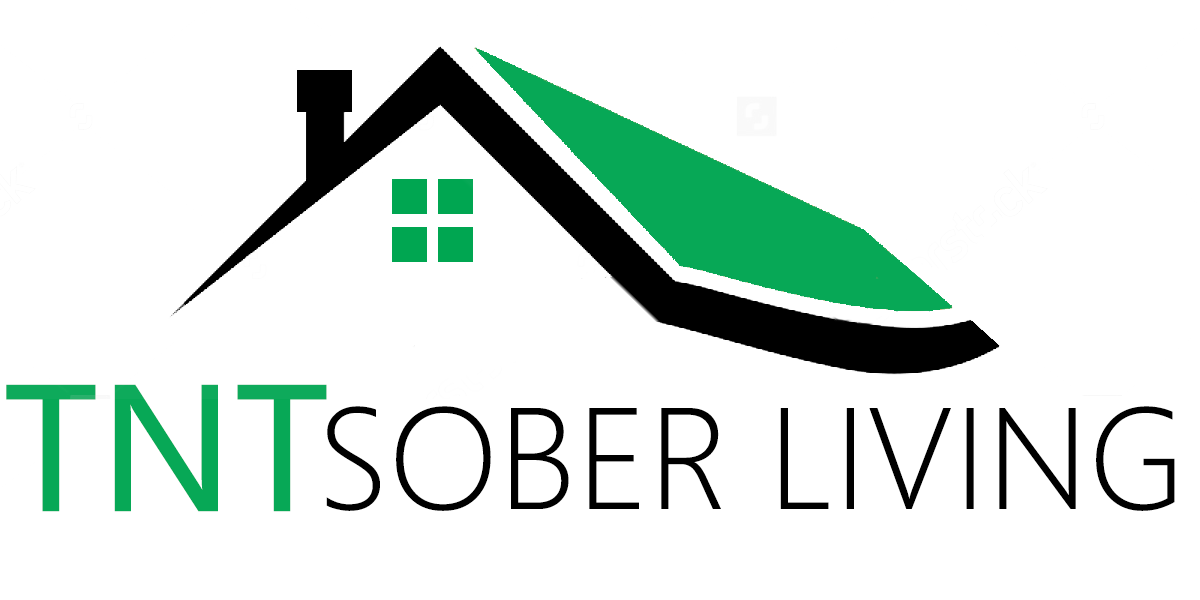
<style>
.page{position:relative;width:1200px;height:600px;background:#ffffff}
.page>*{position:absolute;margin:0}
.t1{font:166.7px "MicrosoftYaHeiUI";color:#07a856}
.t2{font:133.3px "MicrosoftYaHeiUILight";color:#000000}
</style>
<div class="page">
<p class="t1" style="left:6px;top:384px;width:321px;height:128px">TNT</p>
<p class="t2" style="left:326px;top:406px;width:849px;height:105px">SOBER LIVING</p>
</div>
